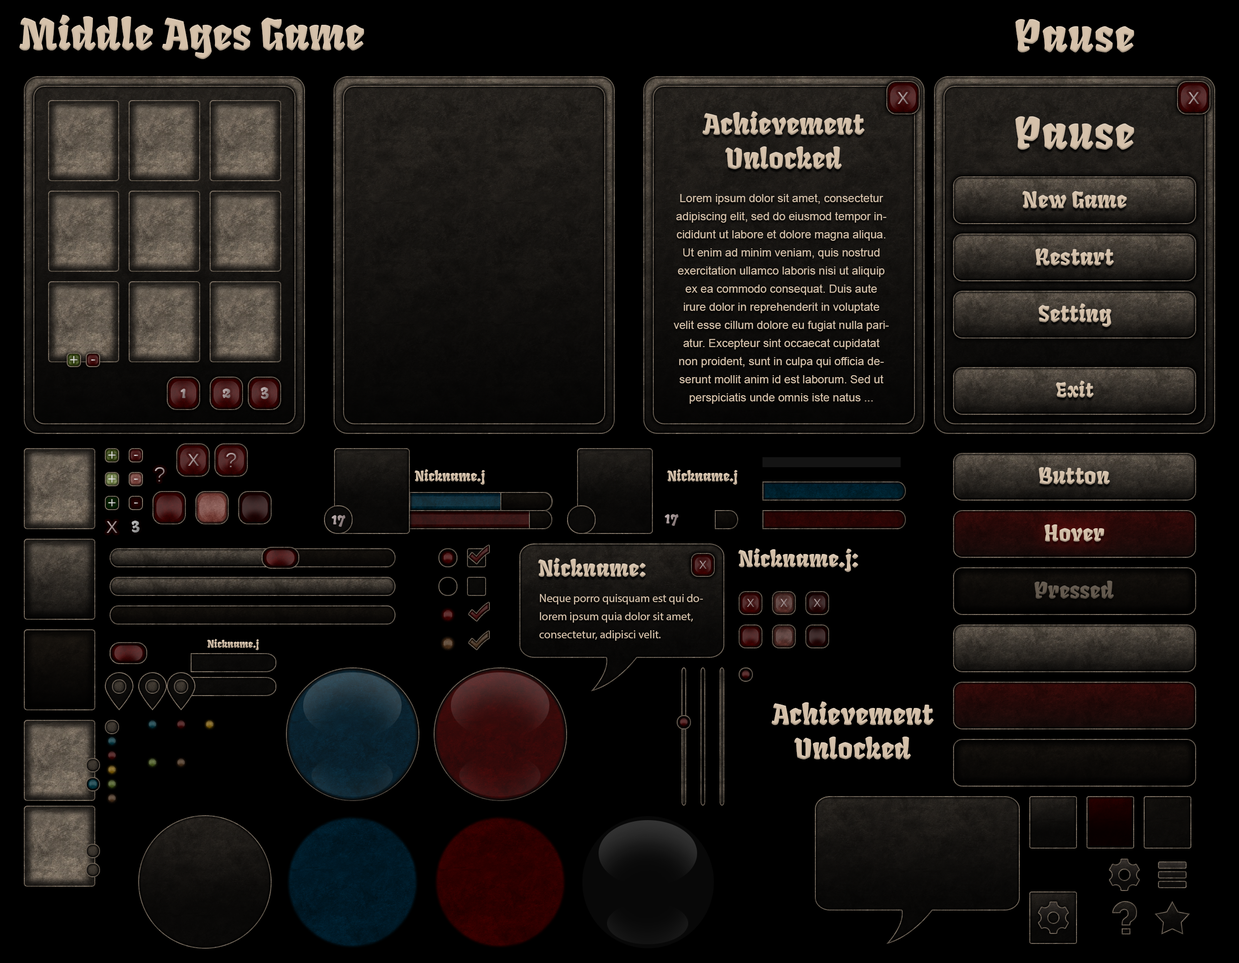
<style>
.page{position:relative;width:1239px;height:963px;background:#000000}
.page>*{position:absolute;margin:0}
.t1{font:42.9px "Fruktur-Regular";color:#d5c1aa}
.t2{font:43.8px "Fruktur-Regular";letter-spacing:0.025em;color:#d5c1aa}
.t3{font:22.9px "Kalinga";color:#9e9090}
.t4{font:28.6px "Fruktur-Regular";color:#d5c1aa}
.t5{font:11.4px/18.1px "ArialMT";color:#d5c1aa}
.t6{font:22.9px "Fruktur-Regular";color:#d5c1aa}
.t7{font:14.5px "Kalinga";color:#e0e0e0}
.t8{font:14.5px "Kalinga"}
.t9{font:15.7px "Fruktur-Regular"}
.t10{font:20px "Fruktur-Regular";letter-spacing:0.025em;color:#d5c1aa}
.t11{font:20px "Kalinga"}
.t12{font:14.3px "Fruktur-Regular";color:#d5c1aa}
.t13{font:15.7px "Fruktur-Regular";color:#a2a2a2}
.t14{font:15.7px "Fruktur-Regular";color:#9f9191}
.t15{font:22.9px "Fruktur-Regular";color:#d4c0a9}
.t16{font:23.1px "Fruktur-Regular";color:#d5c1aa}
.t17{font:22.9px "Fruktur-Regular";color:#63594d}
.t18{font:11.4px/18.1px "MyriadPro-Regular";color:#d5c1aa}
.t19{font:10.5px "Fruktur-Regular";color:#d5c1aa}
</style>
<div class="page">
<p class="t1" style="left:19px;top:15px;width:345px;height:44px">Middle Ages Game</p>
<p class="t2" style="left:1015px;top:19px;width:119px;height:33px">Pause</p>
<p class="t3" style="left:897px;top:92px;width:12px;height:12px">x</p>
<p class="t3" style="left:1188px;top:92px;width:11px;height:12px">x</p>
<p class="t4" style="left:702px;top:111px;width:163px;height:58px;text-align:center">Achievement<br>Unlocked</p>
<p class="t2" style="left:1015px;top:116px;width:119px;height:34px">Pause</p>
<p class="t5" style="left:673px;top:193px;width:216px;height:211px;text-align:center">Lorem ipsum dolor sit amet, consectetur adipiscing elit, sed do eiusmod tempor incididunt ut labore et dolore magna aliqua. Ut enim ad minim veniam, quis nostrud exercitation ullamco laboris nisi ut aliquip ex ea commodo consequat. Duis aute irure dolor in reprehenderit in voluptate velit esse cillum dolore eu fugiat nulla pariatur. Excepteur sint occaecat cupidatat non proident, sunt in culpa qui officia deserunt mollit anim id est laborum. Sed ut perspiciatis unde omnis iste natus ...</p>
<p class="t6" style="left:1022px;top:191px;width:105px;height:17px">New Game</p>
<p class="t6" style="left:1035px;top:248px;width:79px;height:17px">Restart</p>
<p class="t6" style="left:1038px;top:303px;width:73px;height:24px">Setting</p>
<p class="t7" style="left:70px;top:355px;width:8px;height:9px">+</p>
<p class="t8" style="left:91px;top:359px;width:4px;height:2px">-</p>
<p class="t9" style="left:181px;top:388px;width:5px;height:10px">1</p>
<p class="t9" style="left:223px;top:388px;width:8px;height:10px">2</p>
<p class="t9" style="left:261px;top:387px;width:8px;height:12px">3</p>
<p class="t10" style="left:1055px;top:380px;width:39px;height:17px">Exit</p>
<p class="t7" style="left:108px;top:451px;width:8px;height:8px">+</p>
<p class="t8" style="left:134px;top:455px;width:4px;height:1px">-</p>
<p class="t3" style="left:188px;top:454px;width:11px;height:12px">x</p>
<p class="t11" style="left:226px;top:453px;width:10px;height:14px">?</p>
<p class="t11" style="left:155px;top:467px;width:10px;height:14px">?</p>
<p class="t12" style="left:415px;top:469px;width:70px;height:16px">Nickname.j</p>
<p class="t12" style="left:667px;top:469px;width:71px;height:16px">Nickname.j</p>
<p class="t6" style="left:1039px;top:467px;width:71px;height:18px">Button</p>
<p class="t7" style="left:108px;top:475px;width:8px;height:8px">+</p>
<p class="t8" style="left:134px;top:478px;width:4px;height:2px">-</p>
<p class="t7" style="left:108px;top:498px;width:8px;height:9px">+</p>
<p class="t8" style="left:134px;top:502px;width:4px;height:2px">-</p>
<p class="t3" style="left:106px;top:521px;width:12px;height:12px">x</p>
<p class="t13" style="left:132px;top:520px;width:8px;height:12px">3</p>
<p class="t14" style="left:332px;top:515px;width:13px;height:12px">17</p>
<p class="t14" style="left:665px;top:514px;width:14px;height:12px">17</p>
<p class="t15" style="left:1044px;top:524px;width:60px;height:18px">Hover</p>
<p class="t16" style="left:538px;top:557px;width:108px;height:20px">Nickname:</p>
<p class="t16" style="left:738px;top:548px;width:120px;height:24px">Nickname.j:</p>
<p class="t17" style="left:1034px;top:580px;width:80px;height:18px">Pressed</p>
<p class="t18" style="left:539px;top:594px;width:164px;height:46px">Neque porro quisquam est qui dolorem ipsum quia dolor sit amet, consectetur, adipisci velit.</p>
<p class="t19" style="left:207px;top:638px;width:52px;height:12px">Nickname.j</p>
<p class="t4" style="left:771px;top:701px;width:163px;height:58px;text-align:center">Achievement<br>Unlocked</p>
</div>
